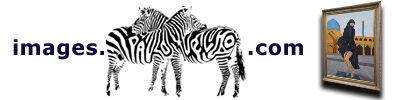
<style>
.page{position:relative;width:400px;height:100px;background:#ffffff}
.page>*{position:absolute;margin:0}
.t1{font:20.7px "Verdana-Bold";letter-spacing:0.025em;color:#0a0a3b}
</style>
<div class="page">
<p class="t1" style="left:13px;top:39px;width:91px;height:21px">images.</p>
<p class="t1" style="left:248px;top:43px;width:55px;height:13px">.com</p>
</div>
